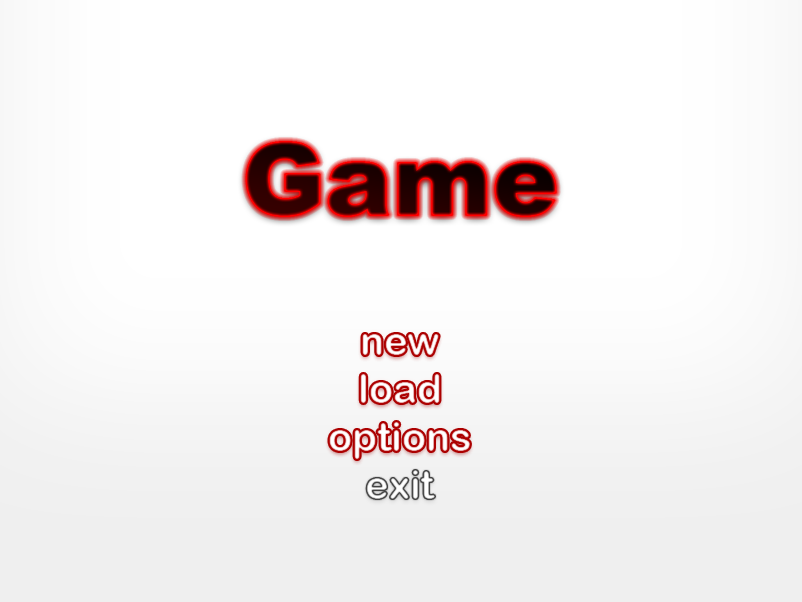
<style>
.page{position:relative;width:802px;height:602px;background:#ffffff}
.page>*{position:absolute;margin:0}
.t1{font:100px "Arial-Black"}
.t2{font:40px "ArialRoundedMTBold"}
</style>
<div class="page">
<p class="t1" style="left:246px;top:142px;width:310px;height:74px">Game</p>
<p class="t2" style="left:362px;top:334px;width:77px;height:21px">new</p>
<p class="t2" style="left:360px;top:374px;width:80px;height:29px">load</p>
<p class="t2" style="left:329px;top:422px;width:141px;height:37px">options</p>
</div>
